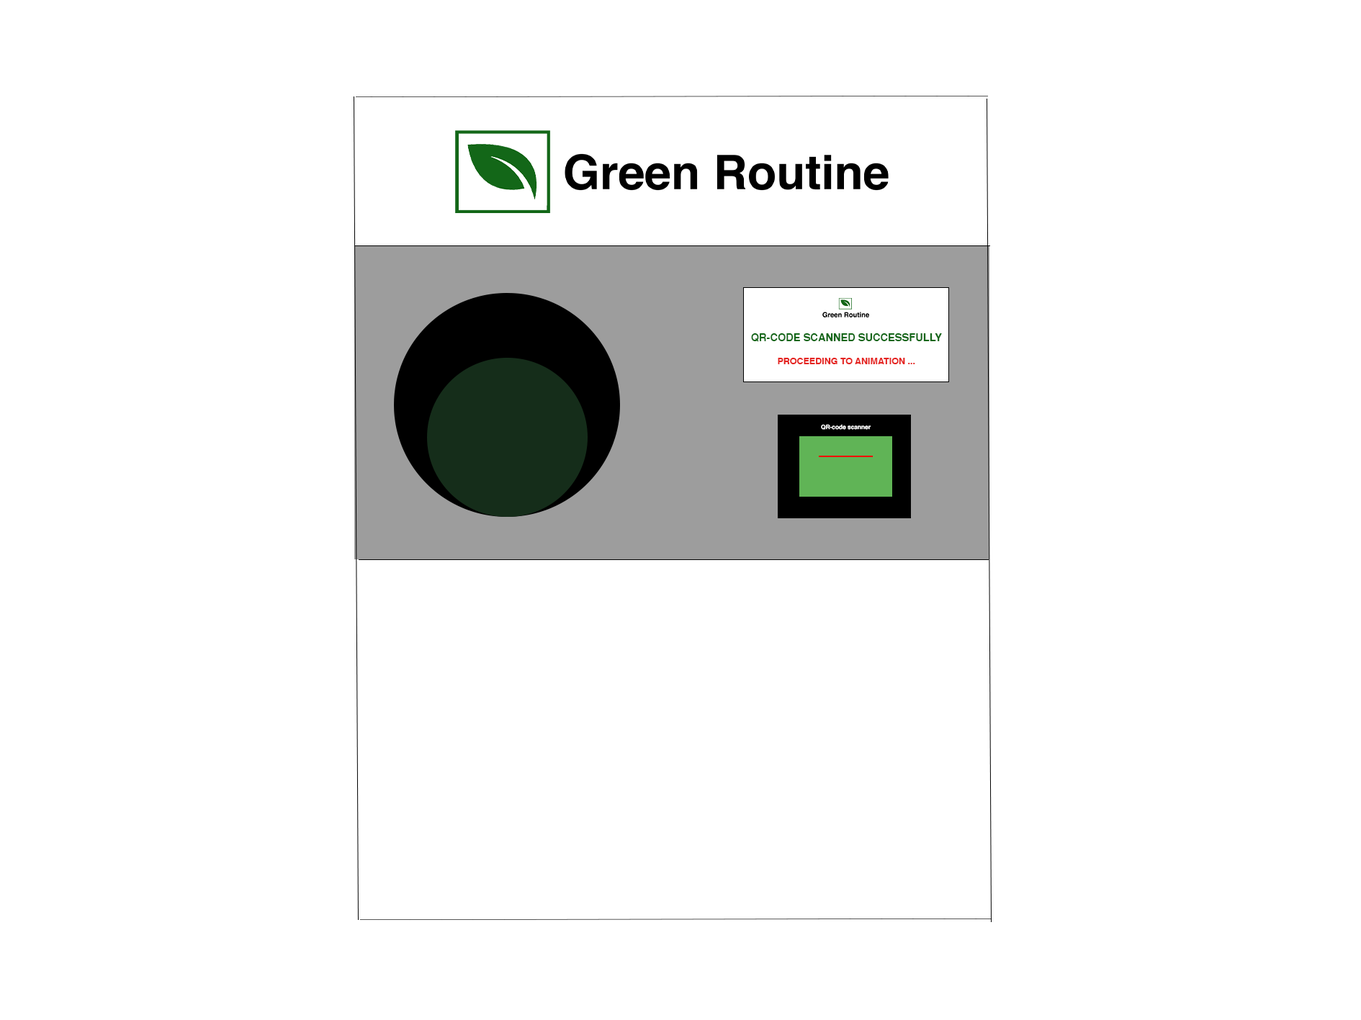
<style>
.page{position:relative;width:1361px;height:1020px;background:#ffffff}
.page>*{position:absolute;margin:0}
.t1{font:10.5px "Helvetica-Bold";color:#136718}
.t2{font:9px "Helvetica-Bold";color:#e52320}
.t3{font:6px "Helvetica-Bold";color:#ffffff}
</style>
<div class="page">
<p class="t1" style="left:751px;top:333px;width:191px;height:9px">QR-CODE SCANNED SUCCESSFULLY</p>
<p class="t2" style="left:778px;top:358px;width:137px;height:6px">PROCEEDING TO ANIMATION ...</p>
<p class="t3" style="left:821px;top:424px;width:50px;height:6px">QR-code scanner</p>
</div>
